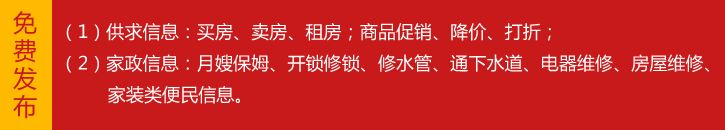
<style>
.page{position:relative;width:725px;height:130px;background:#c81a1b}
.page>*{position:absolute;margin:0}
.t1{font:24px/28px "MicrosoftYaHei";color:#c81a1b}
.t2{font:18px/31.5px "MicrosoftYaHei";color:#ffffff}
</style>
<div class="page">
<p class="t1" style="left:13px;top:11px;width:24px;height:108px">免<br>费<br>发<br>布</p>
<p class="t2" style="left:66px;top:23px;width:644px;height:81px">（1）供求信息：买房、卖房、租房；商品促销、降价、打折；<br>（2）家政信息：月嫂保姆、开锁修锁、修水管、通下水道、电器维修、房屋维修、<br>         家装类便民信息。</p>
</div>
